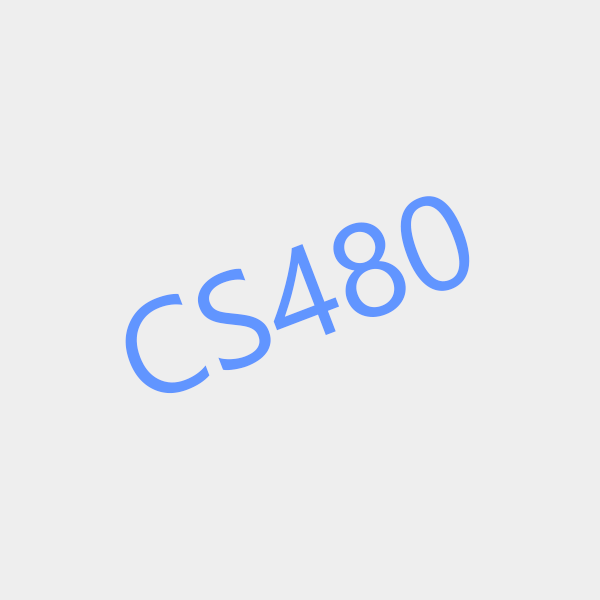
<style>
.page{position:relative;width:600px;height:600px;background:#eeeeee}
.page>*{position:absolute;margin:0}
.t1{font:133.3px "Ebrima";color:#6195ff}
</style>
<div class="page">
<p class="t1" style="left:125px;top:196px;width:345px;height:198px;rotate:-21deg">CS480</p>
</div>
